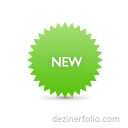
<style>
.page{position:relative;width:128px;height:128px;background:#ffffff}
.page>*{position:absolute;margin:0}
.t1{font:13px "GillSans";color:#ffffff;text-transform:uppercase;font-weight:bold}
.t2{font:10px "Calibri"}
</style>
<div class="page">
<p class="t1" style="left:51px;top:57px;width:32px;height:10px">NEW</p>
<p class="t2" style="left:52px;top:115px;width:68px;height:7px">dezinerfolio.com</p>
</div>
